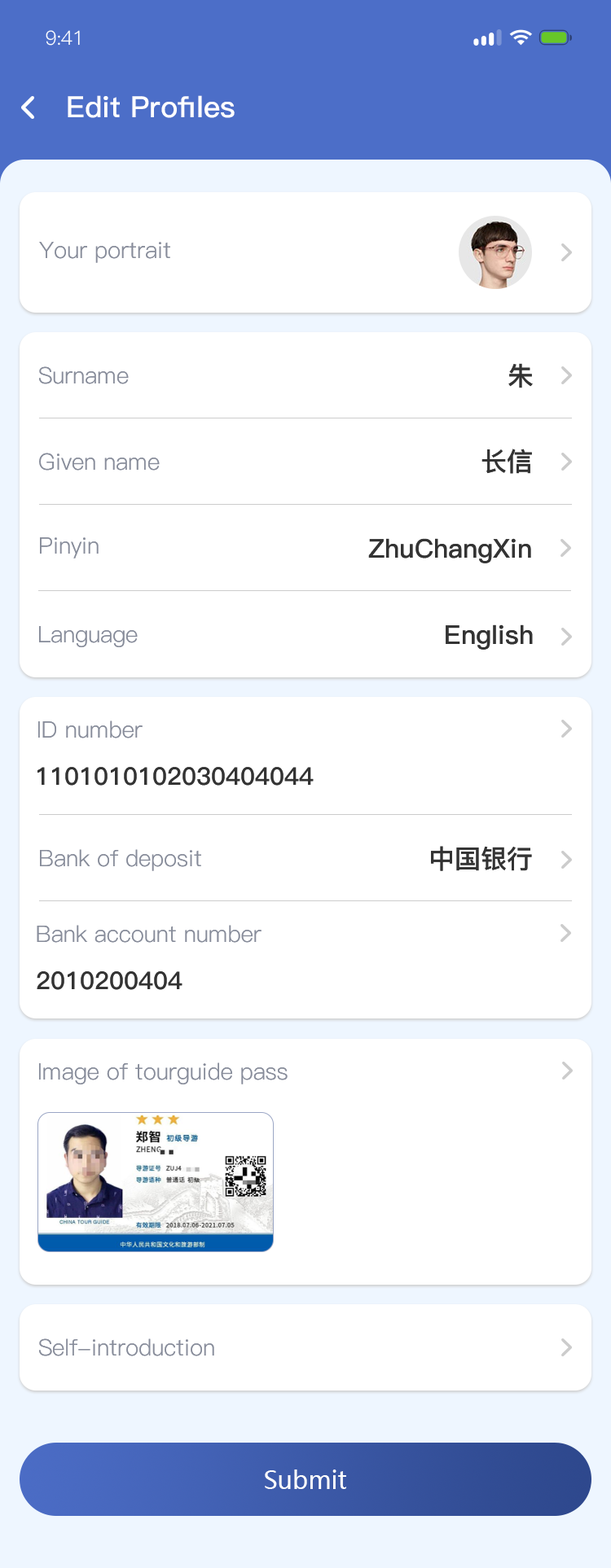
<style>
.page{position:relative;width:611px;height:1568px;background:#ffffff}
.page>*{position:absolute;margin:0}
.t1{font:19.5px "PingFang-SC-Regular";letter-spacing:-0.025em;color:#ffffff}
.t2{font:29.3px "PingFang-SC-Bold";color:#ffffff}
.t3{font:29.3px "PingFang-SC-Bold";color:#ffffff;text-transform:uppercase}
.t4{font:22.8px "PingFang-SC-Regular";color:#878c9a}
.t5{font:26.1px "PingFang-SC-Bold";color:#333333;text-transform:uppercase}
.t6{font:22.8px "PingFang-SC-Regular";color:#878c9a;text-transform:uppercase}
.t7{font:26.1px "PingFang-SC-Bold";color:#333333}
.t8{font:24.4px "PingFang-SC-Bold";color:#333333}
.t9{font:24.4px "MicrosoftYaHei";color:#ffffff}
</style>
<div class="page">
<p class="t1" style="left:46px;top:30px;width:34px;height:16px">9:41</p>
<p class="t2" style="left:68px;top:95px;width:166px;height:23px"><span class="t3">e</span>dit <span class="t3">p</span>rofiles</p>
<p class="t4" style="left:39px;top:242px;width:131px;height:21px">Your portrait</p>
<p class="t5" style="left:508px;top:363px;width:24px;height:25px">朱</p>
<p class="t4" style="left:39px;top:366px;width:90px;height:18px"><span class="t6">s</span>urname</p>
<p class="t5" style="left:481px;top:449px;width:51px;height:25px">长信</p>
<p class="t4" style="left:39px;top:453px;width:121px;height:18px"><span class="t6">g</span>iven name</p>
<p class="t4" style="left:40px;top:537px;width:59px;height:21px"><span class="t6">p</span>inyin</p>
<p class="t7" style="left:368px;top:538px;width:163px;height:25px"><span class="t5">Z</span>huChangXin</p>
<p class="t4" style="left:39px;top:626px;width:99px;height:21px"><span class="t6">l</span>anguage</p>
<p class="t7" style="left:445px;top:624px;width:87px;height:26px">English</p>
<p class="t4" style="left:38px;top:720px;width:104px;height:18px"><span class="t6">i</span>D number</p>
<p class="t8" style="left:37px;top:767px;width:276px;height:19px">1101010102030404044</p>
<p class="t7" style="left:431px;top:846px;width:101px;height:25px">中国银行</p>
<p class="t4" style="left:40px;top:849px;width:161px;height:22px"><span class="t6">b</span>ank of deposit</p>
<p class="t4" style="left:37px;top:925px;width:224px;height:18px"><span class="t6">b</span>ank account number</p>
<p class="t8" style="left:37px;top:971px;width:145px;height:19px">2010200404</p>
<p class="t4" style="left:39px;top:1062px;width:248px;height:22px"><span class="t6">i</span>mage of tourguide pass</p>
<p class="t4" style="left:39px;top:1338px;width:175px;height:18px"><span class="t6">s</span>elf-introduction</p>
<p class="t9" style="left:265px;top:1469px;width:81px;height:20px">Submit</p>
</div>
